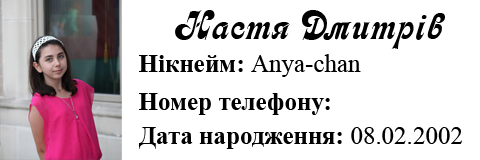
<style>
.page{position:relative;width:480px;height:160px;background:#ffffff}
.page>*{position:absolute;margin:0}
.t1{font:41.7px "Asessor";color:#000000}
.t2{font:25px "TimesNewRomanPSMT";color:#000000}
.t3{font:25px "TimesNewRomanPS-BoldMT";color:#000000}
</style>
<div class="page">
<p class="t1" style="left:175px;top:10px;width:270px;height:39px">Настя Дмитрів</p>
<p class="t2" style="left:139px;top:54px;width:222px;height:23px"><span class="t3">Нікнейм: </span>Anya-chan</p>
<p class="t3" style="left:139px;top:93px;width:191px;height:22px">Номер телефону:</p>
<p class="t3" style="left:139px;top:127px;width:323px;height:22px">Дата народження: <span class="t2">08.02.2002</span></p>
</div>
